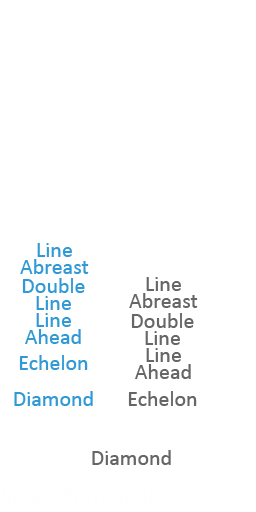
<style>
.page{position:relative;width:256px;height:512px;background:#ffffff}
.page>*{position:absolute;margin:0}
.t1{font:22px/17px "Calibri";color:#319ad6}
.t2{font:22px/17px "Calibri";color:#656665}
.t3{font:22px "Calibri";color:#319ad6}
.t4{font:22px "Calibri";color:#656665}
</style>
<div class="page">
<p class="t1" style="left:20px;top:243px;width:69px;height:31px;text-align:center">Line<br>Abreast</p>
<p class="t1" style="left:22px;top:278px;width:63px;height:32px;text-align:center">Double<br>Line</p>
<p class="t2" style="left:129px;top:277px;width:69px;height:31px;text-align:center">Line<br>Abreast</p>
<p class="t1" style="left:25px;top:313px;width:56px;height:31px;text-align:center">Line<br>Ahead</p>
<p class="t2" style="left:131px;top:313px;width:63px;height:32px;text-align:center">Double<br>Line</p>
<p class="t2" style="left:135px;top:348px;width:56px;height:31px;text-align:center">Line<br>Ahead</p>
<p class="t3" style="left:19px;top:355px;width:69px;height:15px">Echelon</p>
<p class="t3" style="left:14px;top:391px;width:79px;height:15px">Diamond</p>
<p class="t4" style="left:128px;top:391px;width:69px;height:15px">Echelon</p>
<p class="t4" style="left:92px;top:450px;width:79px;height:15px">Diamond</p>
</div>
